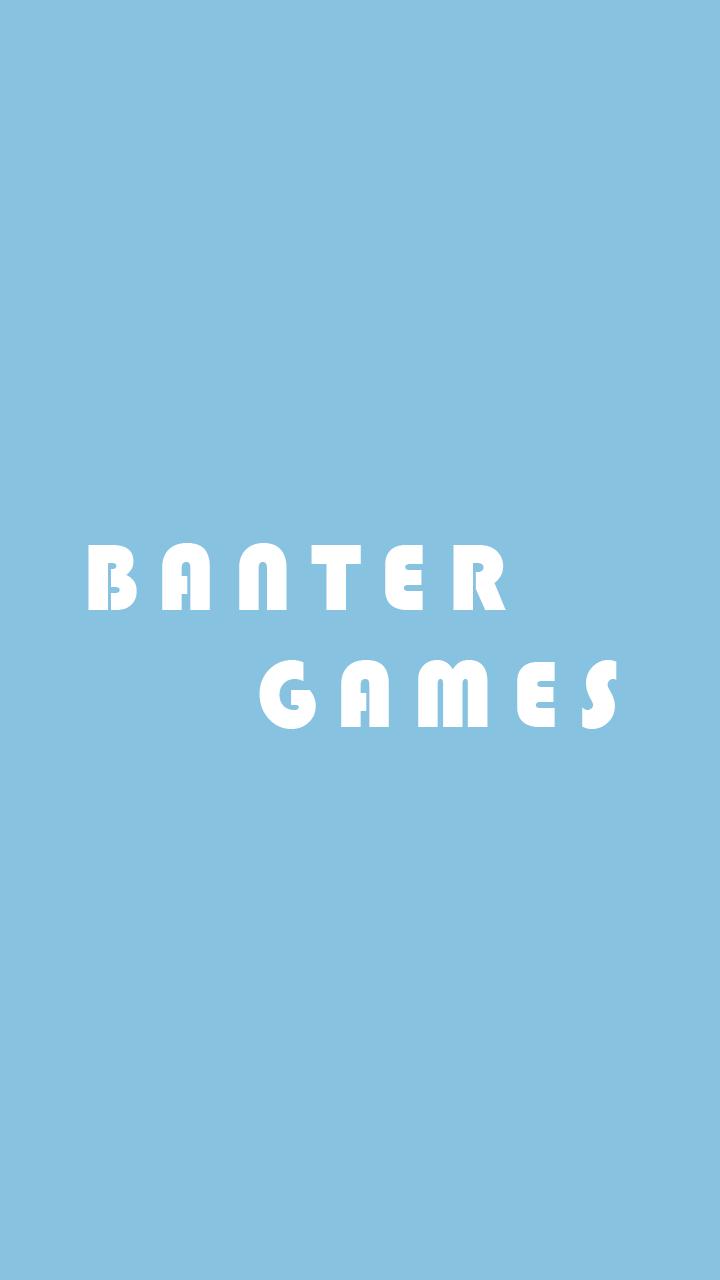
<style>
.page{position:relative;width:720px;height:1280px;background:#87c3e1}
.page>*{position:absolute;margin:0}
.t1{font:97.5px "Bauhaus93";letter-spacing:0.2em;color:#ffffff}
</style>
<div class="page">
<p class="t1" style="left:88px;top:543px;width:529px;height:186px">BANTER<br>    GAMES</p>
</div>
